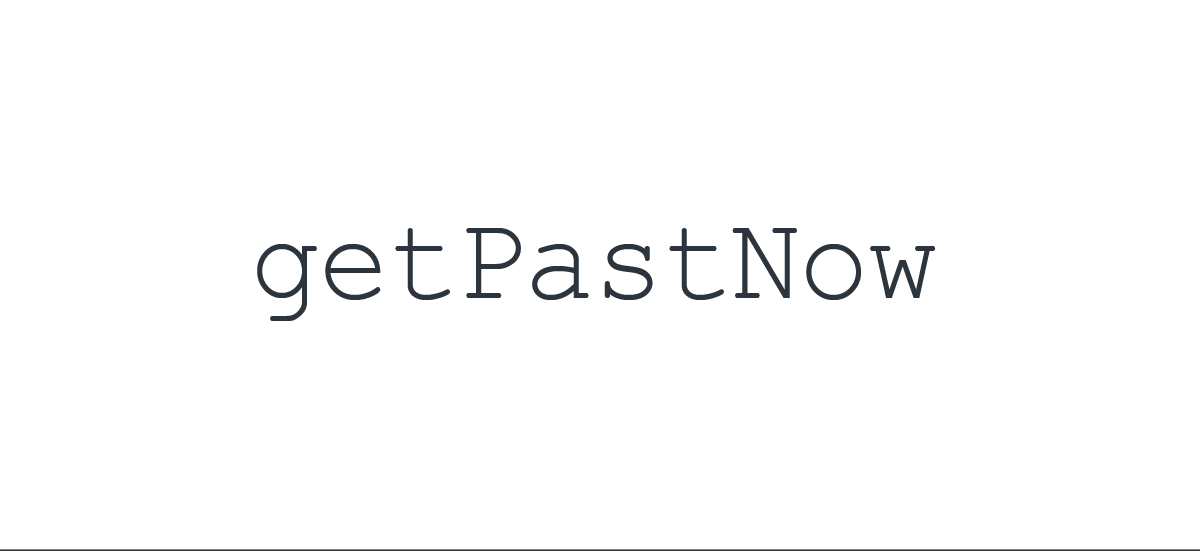
<style>
.page{position:relative;width:1200px;height:551px;background:#ffffff}
.page>*{position:absolute;margin:0}
.t1{font:122.5px "CourierNewPSMT";letter-spacing:-0.025em;color:#2c343e}
</style>
<div class="page">
<p class="t1" style="left:257px;top:228px;width:679px;height:93px">getPastNow</p>
</div>
